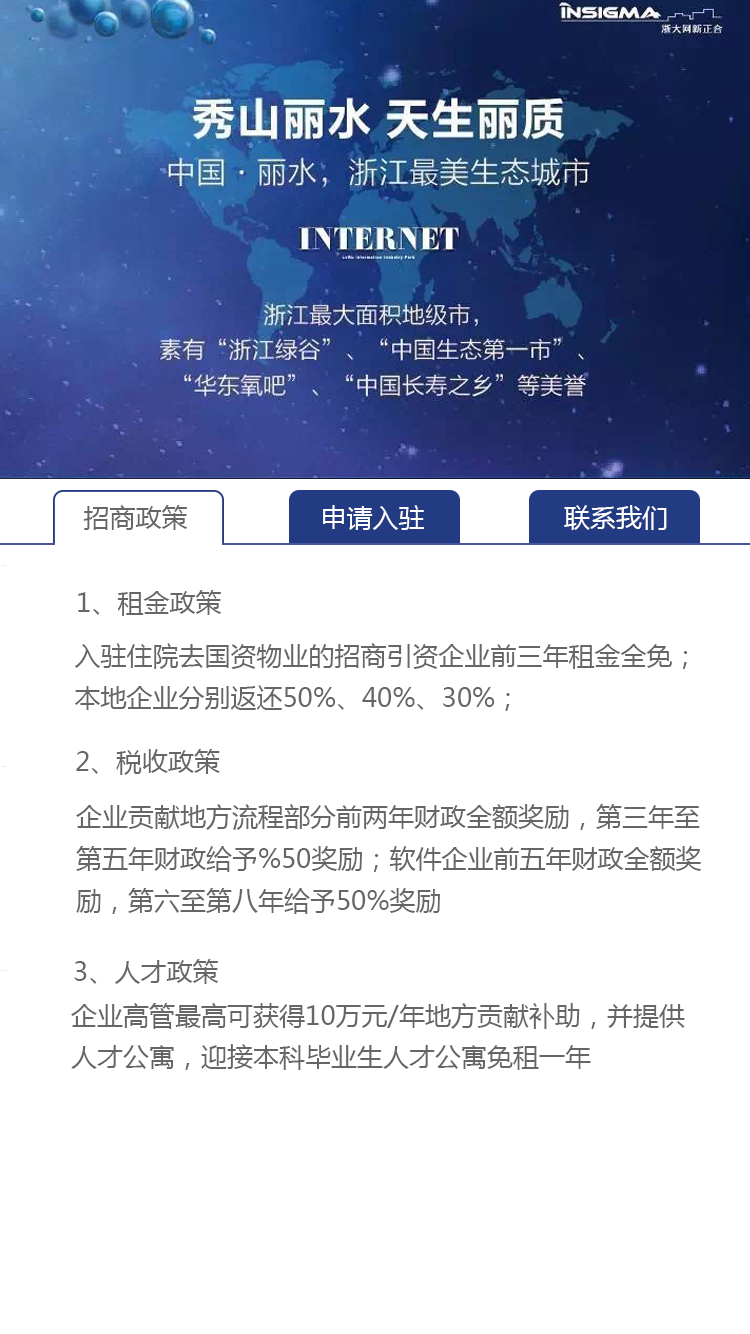
<style>
.page{position:relative;width:750px;height:1334px;background:#ffffff}
.page>*{position:absolute;margin:0}
.t1{font:26px "MicrosoftYaHei";color:#666666}
.t2{font:26px "MicrosoftYaHei";color:#ffffff}
.t3{font:26px/38.5px "MicrosoftYaHei";color:#666666}
.t4{font:26px/37.5px "MicrosoftYaHei";color:#666666}
</style>
<div class="page">
<p class="t1" style="left:83px;top:505px;width:105px;height:25px">招商政策</p>
<p class="t2" style="left:323px;top:505px;width:101px;height:25px">申请入驻</p>
<p class="t2" style="left:564px;top:505px;width:103px;height:25px">联系我们</p>
<p class="t1" style="left:78px;top:590px;width:144px;height:26px">1、租金政策</p>
<p class="t3" style="left:74px;top:643px;width:614px;height:68px">入驻住院去国资物业的招商引资企业前三年租金全免；<br>本地企业分别返还50%、40%、30%；</p>
<p class="t1" style="left:76px;top:749px;width:144px;height:26px">2、税收政策</p>
<p class="t3" style="left:76px;top:804px;width:626px;height:110px">企业贡献地方流程部分前两年财政全额奖励，第三年至<br>第五年财政给予%50奖励；软件企业前五年财政全额奖<br>励，第六至第八年给予50%奖励</p>
<p class="t1" style="left:74px;top:959px;width:145px;height:25px">3、人才政策</p>
<p class="t4" style="left:71px;top:1003px;width:614px;height:67px">企业高管最高可获得10万元/年地方贡献补助，并提供<br>人才公寓，迎接本科毕业生人才公寓免租一年</p>
</div>
